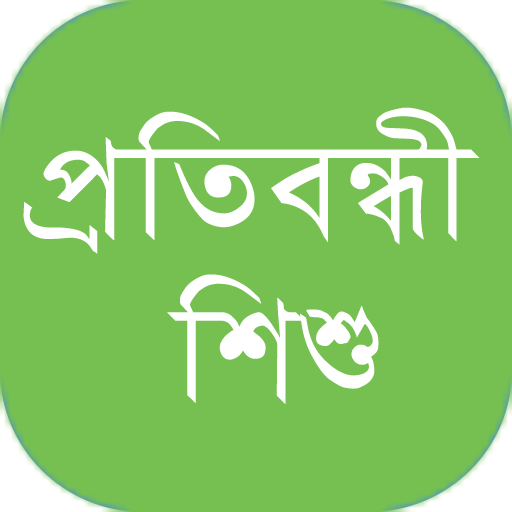
<style>
.page{position:relative;width:512px;height:512px;background:#75c051}
.page>*{position:absolute;margin:0}
.t1{font:162.8px/162.8px "SutonnyMJ";color:#ffffff;font-weight:bold}
</style>
<div class="page">
<p class="t1" style="left:23px;top:107px;width:457px;height:297px;text-align:center">c«wZeÜx <br>wkï</p>
</div>
